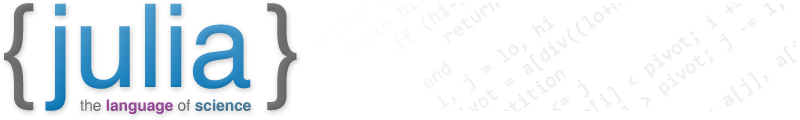
<style>
.page{position:relative;width:800px;height:120px;background:#ffffff}
.page>*{position:absolute;margin:0}
.t1{font:115.4px "Helvetica";color:#6d6d6d}
.t2{font:115.4px "Helvetica";color:#2e8ac1}
.t3{font:15.4px "Helvetica-Bold";color:#984797}
.t4{font:15.4px "Helvetica";color:#6e6e6e}
.t5{font:15.4px "Helvetica";color:#6c6c6c}
.t6{font:15.4px "Helvetica-Bold";color:#447897}
</style>
<div class="page">
<p class="t1" style="left:4px;top:3px;width:293px;height:108px">{       }</p>
<p class="t2" style="left:45px;top:3px;width:206px;height:108px">julia</p>
<p class="t3" style="left:80px;top:99px;width:171px;height:15px"><span class="t4">the </span>language <span class="t5">of </span><span class="t6">science</span></p>
</div>
